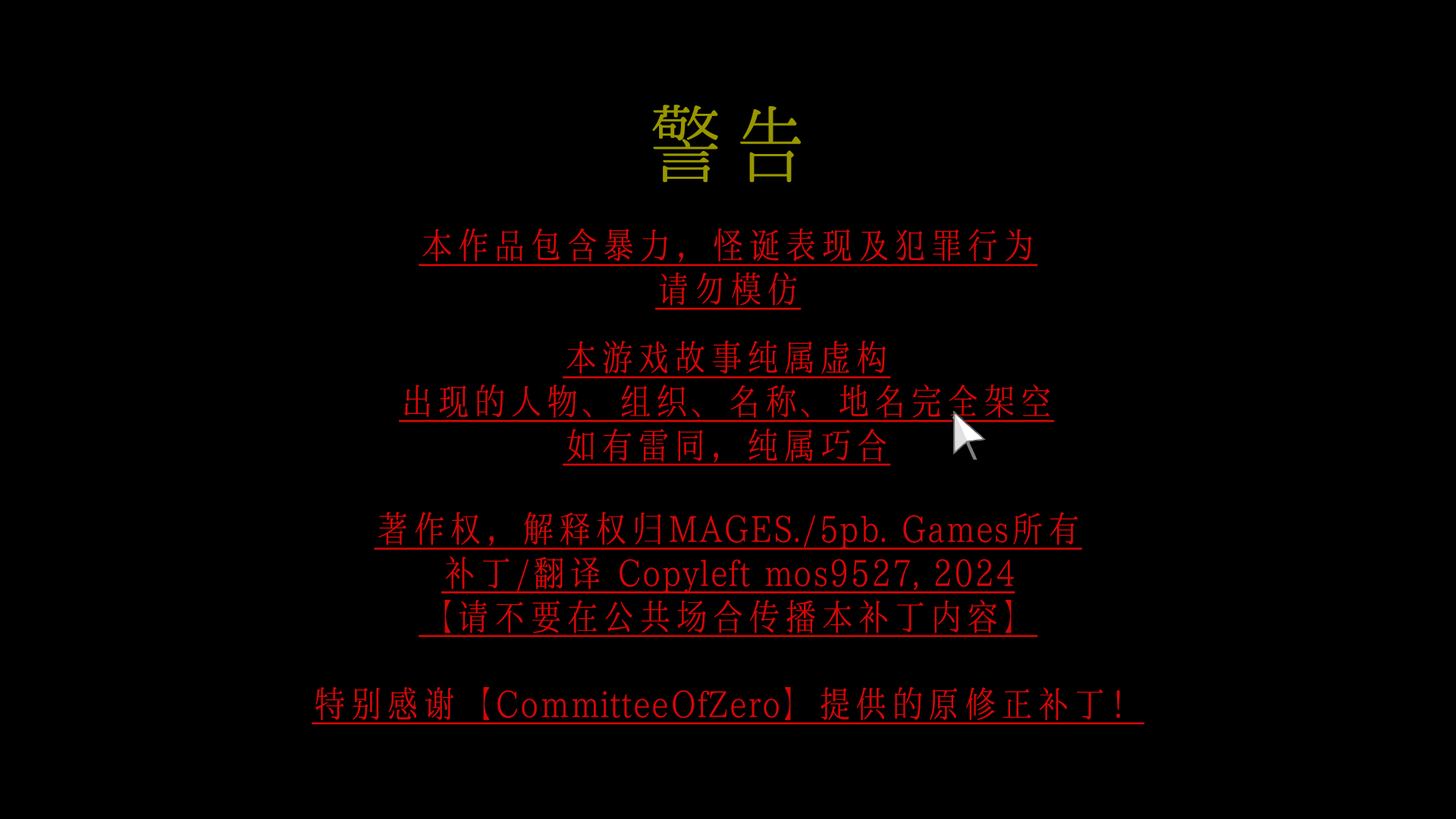
<style>
.page{position:relative;width:1456px;height:819px;background:#000000}
.page>*{position:absolute;margin:0}
.t1{font:84.7px "LXGWHeartSerif";color:#999700}
.t2{font:36.4px "LXGWHeartSerif";color:#d50708;text-decoration:underline}
</style>
<div class="page">
<p class="t1" style="left:652px;top:105px;width:150px;height:78px">警告</p>
<p class="t2" style="left:419px;top:228px;width:619px;height:82px;text-align:center">本作品包含暴力，怪诞表现及犯罪行为<br>请勿模仿</p>
<p class="t2" style="left:399px;top:340px;width:656px;height:126px;text-align:center">本游戏故事纯属虚构<br>出现的人物、组织、名称、地名完全架空<br>如有雷同，纯属巧合</p>
<p class="t2" style="left:312px;top:512px;width:833px;height:213px;text-align:center">著作权，解释权归MAGES./5pb. Games所有<br>补丁/翻译 Copyleft mos9527, 2024<br>【请不要在公共场合传播本补丁内容】<br><br>特别感谢【CommitteeOfZero】提供的原修正补丁！</p>
</div>
